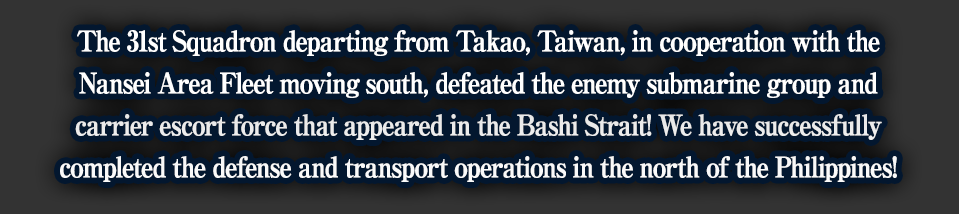
<style>
.page{position:relative;width:959px;height:214px;background:#03172f}
.page>*{position:absolute;margin:0}
.t1{font:28px/42px "RyuminPro-ExBold";letter-spacing:-0.08em;color:#ffffff;font-weight:bold;scale:0.9 1}
</style>
<div class="page">
<p class="t1" style="left:60px;top:30px;width:837px;height:152px;text-align:center">The 31st Squadron departing from Takao, Taiwan, in cooperation with the<br>Nansei Area Fleet moving south, defeated the enemy submarine group and<br>carrier escort force that appeared in the Bashi Strait! We have successfully<br>completed the defense and transport operations in the north of the Philippines!</p>
</div>
